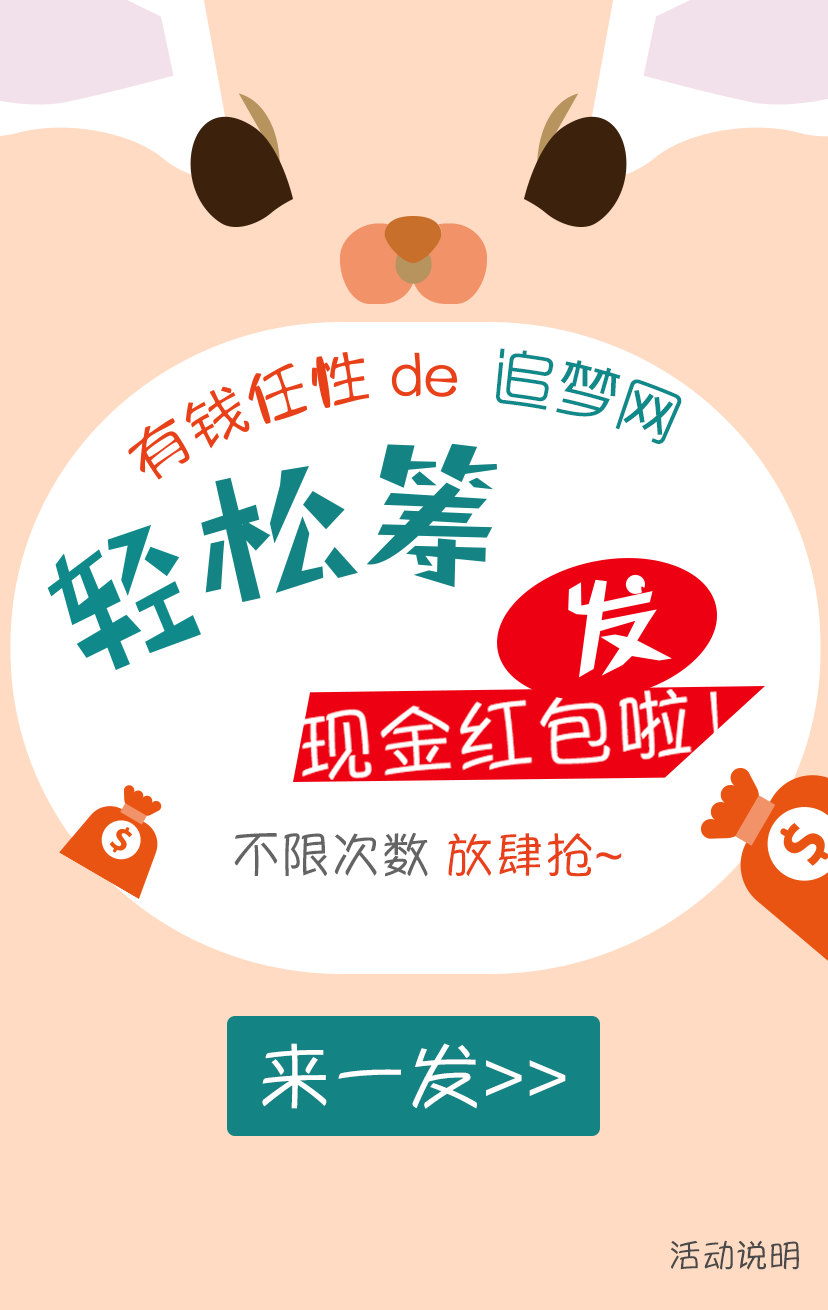
<style>
.page{position:relative;width:828px;height:1310px;background:#ffdbc3}
.page>*{position:absolute;margin:0}
.t1{font:61.3px "RTWSYueGoDemo-Regular";color:#0f8989}
.t2{font:79.7px "YuppySC-Regular";color:#ffffff}
.t3{font:50px "YuppySC-Regular";color:#646464}
.t4{font:50px "YuppySC-Regular";color:#e84018}
.t5{font:75px "YuppySC-Regular";color:#ffffff}
.t6{font:33.3px "YuppySC-Regular";color:#4a4a4a}
</style>
<div class="page">
<p class="t1" style="left:496px;top:348px;width:186px;height:96px;rotate:15deg">追梦网</p>
<p class="t2" style="left:300px;top:689px;width:420px;height:91px;rotate:-4deg">现金红包啦！</p>
<p class="t3" style="left:234px;top:832px;width:388px;height:45px">不限次数 <span class="t4">放肆抢~</span></p>
<p class="t5" style="left:262px;top:1043px;width:304px;height:66px">来一发&gt;&gt;</p>
<p class="t6" style="left:670px;top:1240px;width:129px;height:30px">活动说明</p>
</div>
